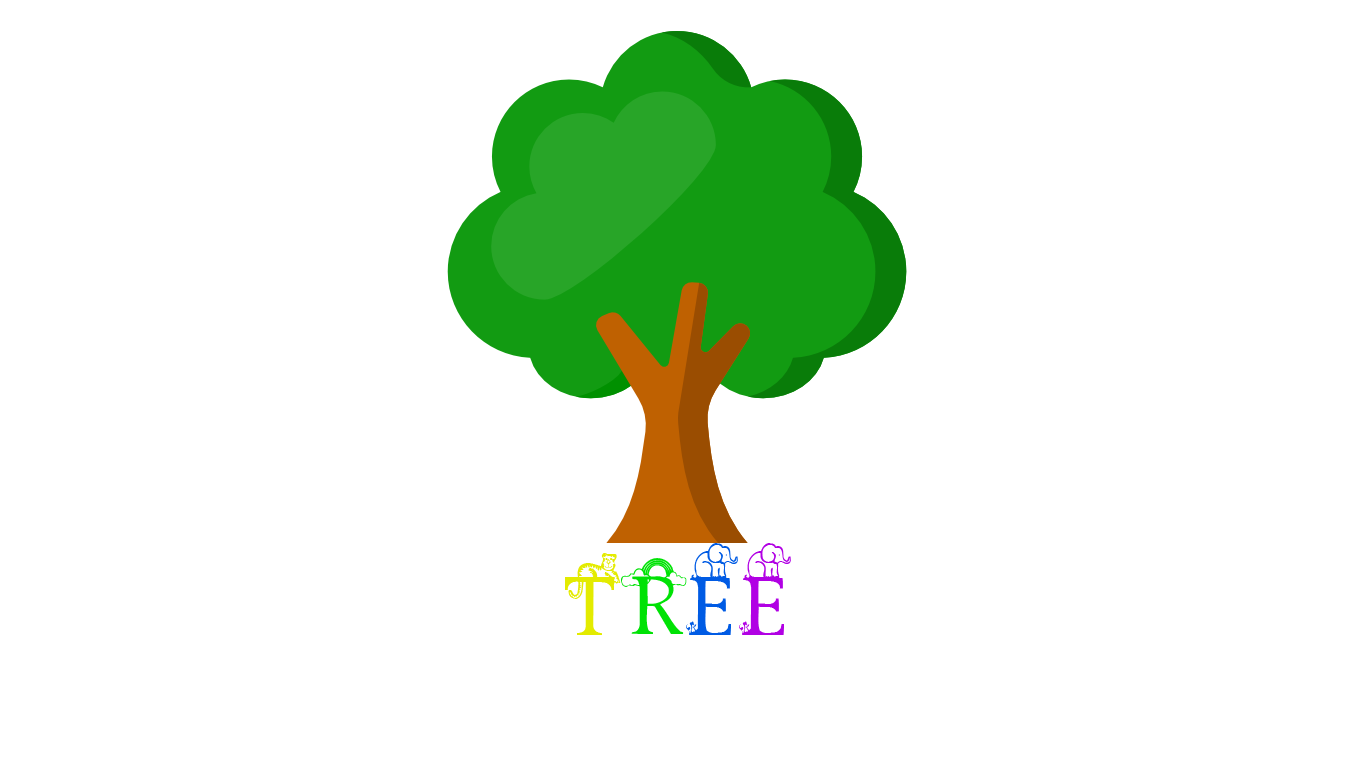
<style>
.page{position:relative;width:1366px;height:768px;background:#ffffff}
.page>*{position:absolute;margin:0}
.t1{font:72px "KidsAlphabet";color:#e3eb00}
.t2{font:72px "KidsAlphabet";color:#00e205}
.t3{font:72px "KidsAlphabet";color:#005be4}
.t4{font:72px "KidsAlphabet";color:#b100e4}
</style>
<div class="page">
<p class="t1" style="left:565px;top:543px;width:226px;height:92px">T<span class="t2">R</span><span class="t3">E</span><span class="t4">E</span></p>
</div>
